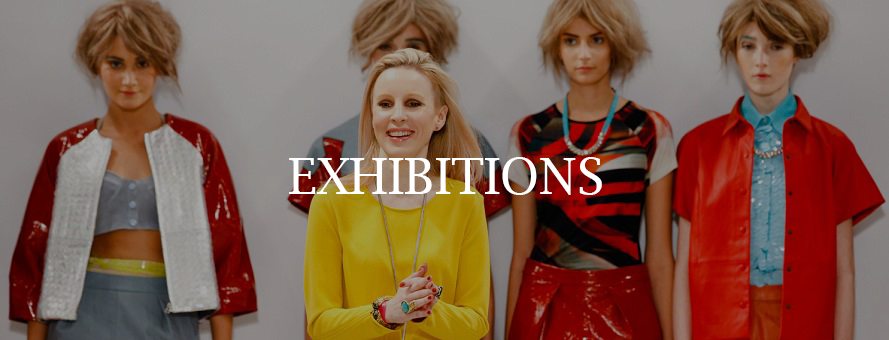
<style>
.page{position:relative;width:889px;height:340px}
.page>*{position:absolute;margin:0}
.t1{font:50px "LucidaBright";color:#ffffff}
</style>
<div class="page">
<p class="t1" style="left:289px;top:157px;width:313px;height:38px">EXHIBITIONS</p>
</div>
